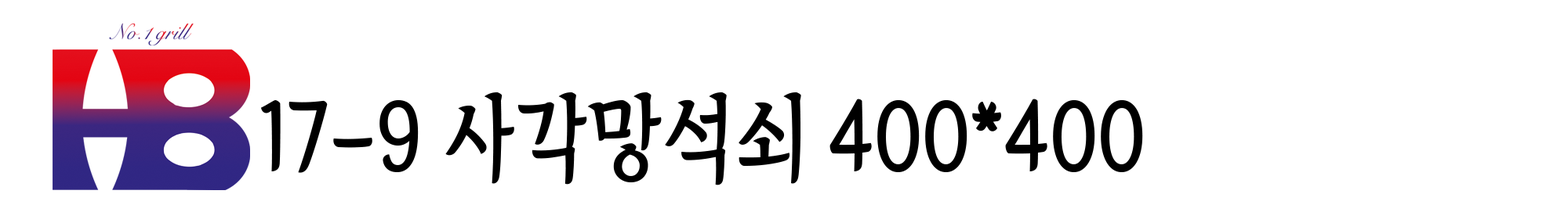
<style>
.page{position:relative;width:1568px;height:205px;background:#ffffff}
.page>*{position:absolute;margin:0}
.t1{font:93.7px "TheIndependenceHallofKorea-Regular";color:#000000;scale:0.89 1}
</style>
<div class="page">
<p class="t1" style="left:261px;top:93px;width:882px;height:93px">17-9 사각망석쇠 400*400</p>
</div>
